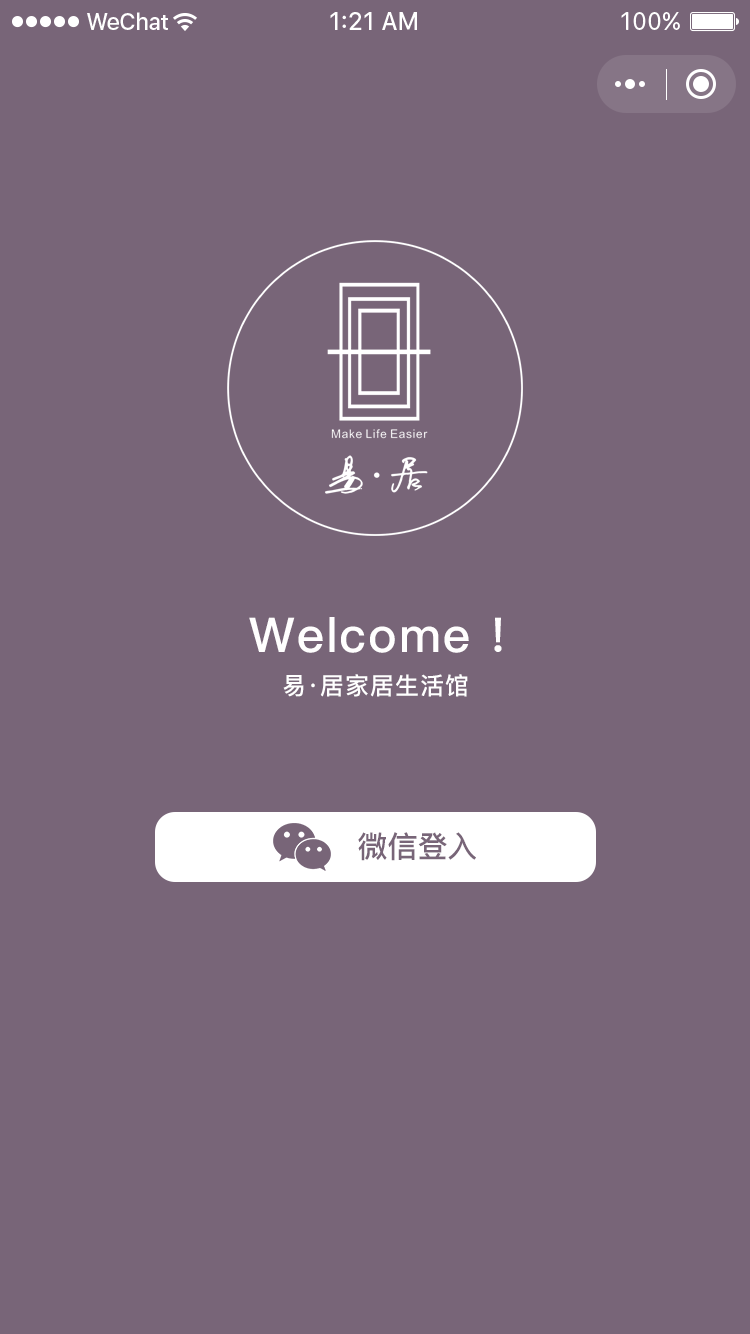
<style>
.page{position:relative;width:750px;height:1334px;background:#786578}
.page>*{position:absolute;margin:0}
.t1{font:48px "PingFang-SC-Bold";letter-spacing:0.04em;color:#fffefe}
.t2{font:24px "PingFang-SC-Bold";letter-spacing:0.04em;color:#ffffff}
.t3{font:30px "PingFang-SC-Bold";color:#786578}
</style>
<div class="page">
<p class="t1" style="left:249px;top:617px;width:253px;height:36px">Welcome !</p>
<p class="t2" style="left:283px;top:674px;width:185px;height:23px">易·居家居生活馆</p>
<p class="t3" style="left:358px;top:832px;width:118px;height:29px">微信登入</p>
</div>
